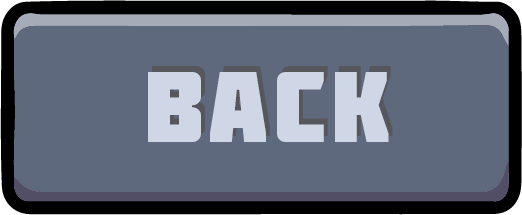
<style>
.page{position:relative;width:522px;height:215px;background:#5e697e}
.page>*{position:absolute;margin:0}
.t1{font:100px "Molot";letter-spacing:0.05em;color:#cfd6e5}
</style>
<div class="page">
<p class="t1" style="left:148px;top:72px;width:241px;height:70px">Back</p>
<p class="t1" style="left:152px;top:66px;width:241px;height:70px">Back</p>
</div>
